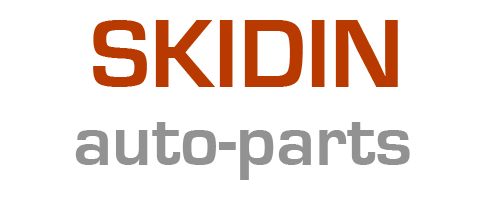
<style>
.page{position:relative;width:500px;height:200px;background:#ffffff}
.page>*{position:absolute;margin:0}
.t1{font:100px "EurostileBold";color:#b93a01}
.t2{font:75px "EurostileBold";color:#929292}
</style>
<div class="page">
<p class="t1" style="left:93px;top:20px;width:305px;height:67px">SKIDIN</p>
<p class="t2" style="left:75px;top:122px;width:335px;height:58px">auto-parts</p>
</div>
